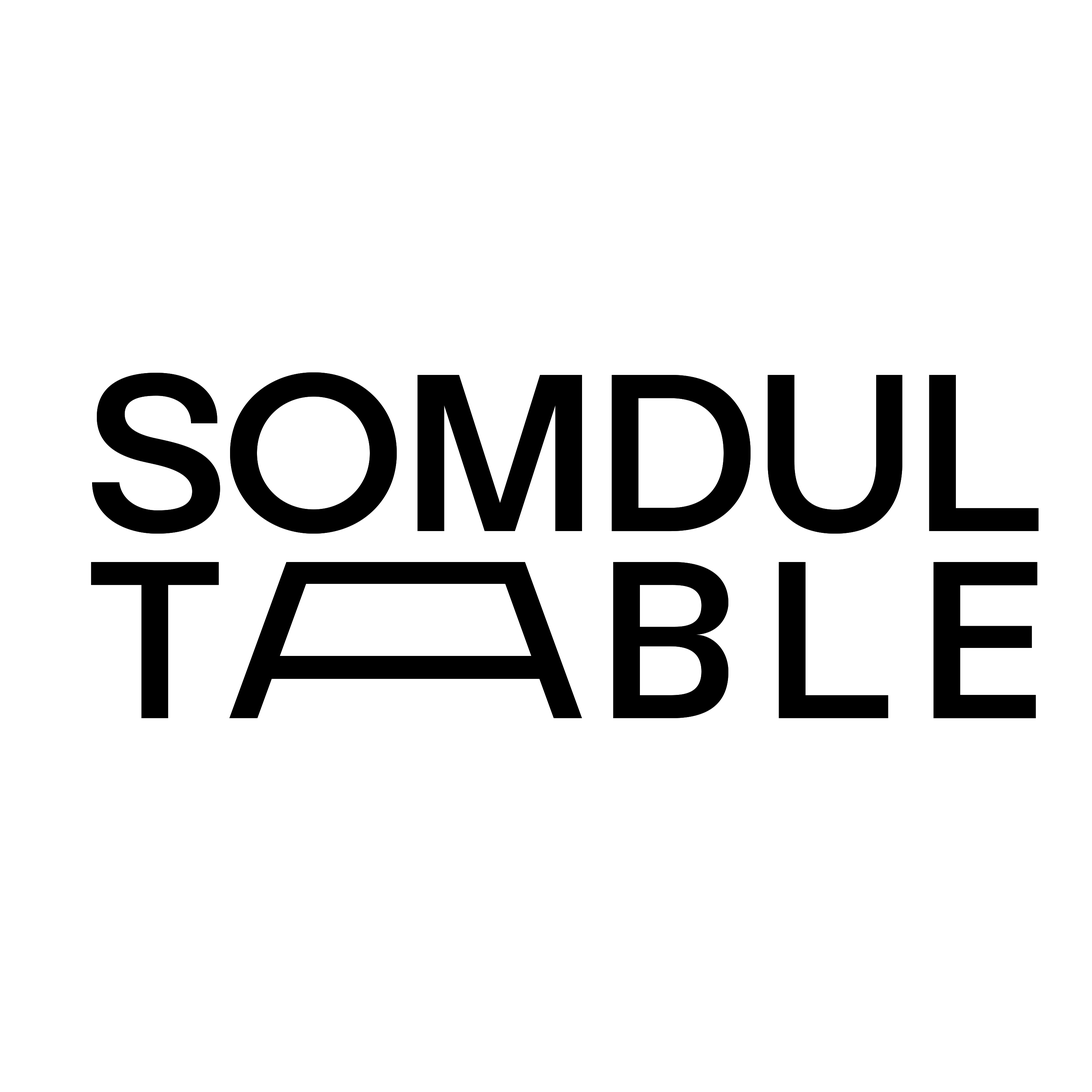
<style>
.page{position:relative;width:1092px;height:1092px;background:#ffffff}
.page>*{position:absolute;margin:0}
.t1{font:246.7px "BaticaSans-Regular";letter-spacing:-0.01em;color:#000000}
.t2{font:246.7px "BaticaSans-Regular";letter-spacing:0.18em;color:#000000}
.t3{font:246.7px "BaticaSans-Regular";letter-spacing:-0.04em;color:#000000}
.t4{font:246.7px "BaticaSans-Regular";letter-spacing:0.1em;color:#000000}
</style>
<div class="page">
<p class="t1" style="left:92px;top:372px;width:947px;height:162px">SOMDUL</p>
<p class="t2" style="left:91px;top:562px;width:128px;height:156px"><span class="t3"><br></span>T</p>
<p class="t4" style="left:613px;top:562px;width:424px;height:157px">BLE</p>
</div>
